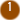
<style>
.page{position:relative;width:20px;height:20px;background:#964b00}
.page>*{position:absolute;margin:0}
.t1{font:14px "Vrinda";color:#ffffff}
</style>
<div class="page">
<p class="t1" style="left:8px;top:2px;width:3px;height:9px">1</p>
</div>
